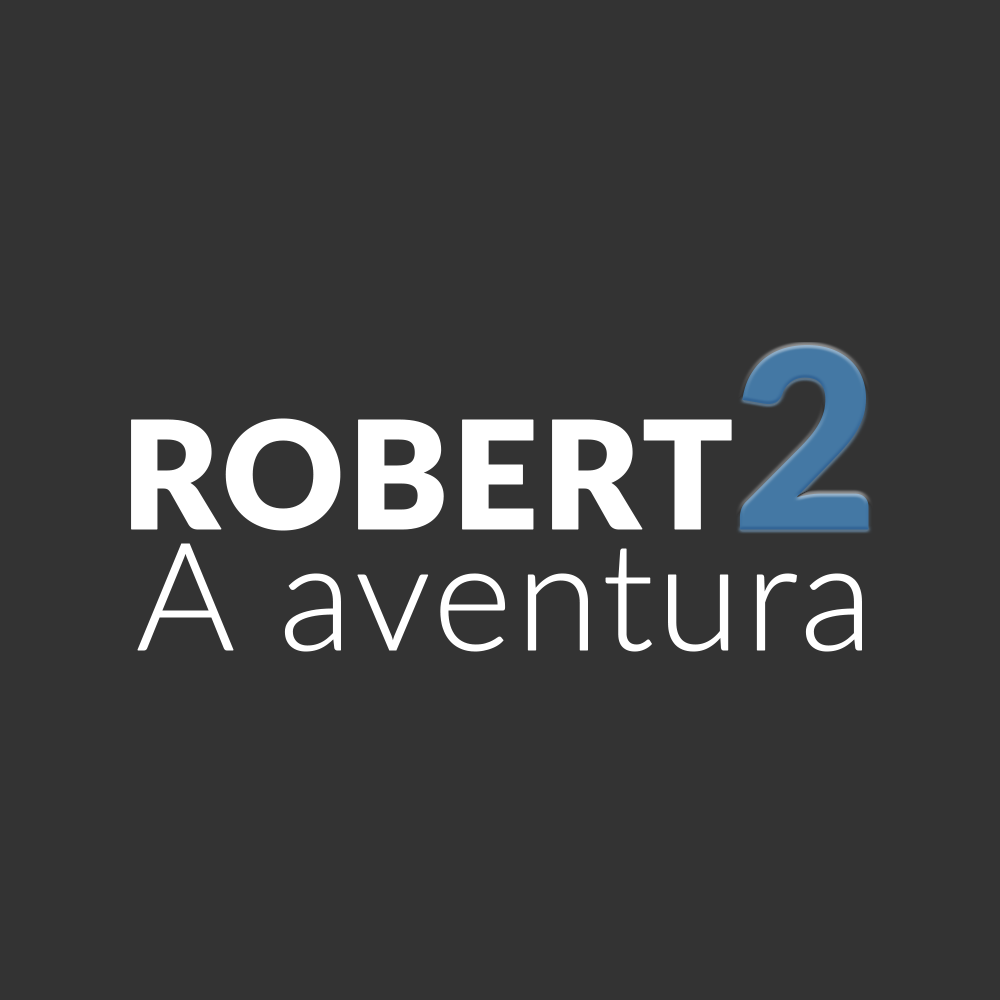
<style>
.page{position:relative;width:1000px;height:1000px;background:#333333}
.page>*{position:absolute;margin:0}
.t1{font:249.4px "Lato-Black";color:#4579a5;font-weight:bold}
.t2{font:149.7px "Lato-Black";color:#ffffff;font-weight:bold}
.t3{font:151px "Lato-Light";color:#ffffff;font-weight:bold}
</style>
<div class="page">
<p class="t1" style="left:739px;top:345px;width:130px;height:185px">2</p>
<p class="t2" style="left:131px;top:418px;width:601px;height:113px">ROBERT</p>
<p class="t3" style="left:137px;top:543px;width:725px;height:109px">A aventura</p>
</div>
